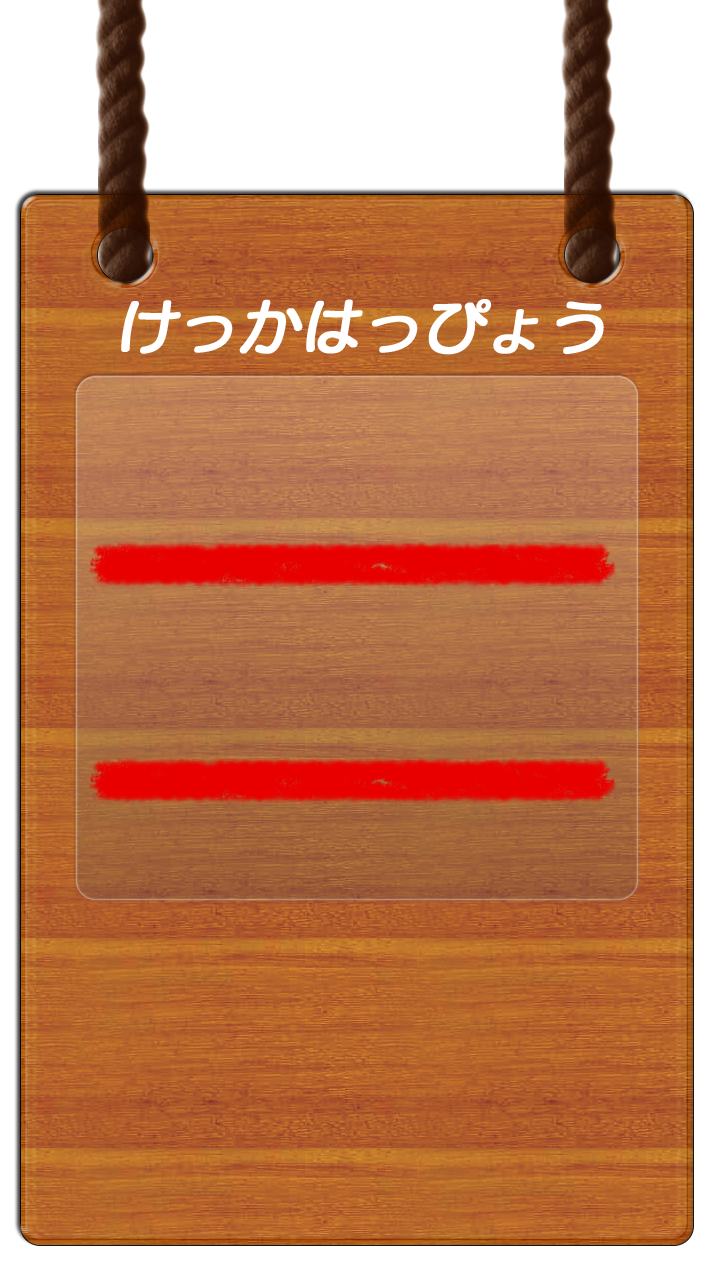
<style>
.page{position:relative;width:720px;height:1280px;background:#ffffff}
.page>*{position:absolute;margin:0}
.t1{font:60px "SeuratPro-DB";color:#ffffff;font-weight:bold;font-style:italic}
</style>
<div class="page">
<p class="t1" style="left:121px;top:299px;width:483px;height:56px">けっかはっぴょう</p>
</div>
